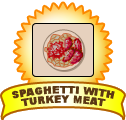
<style>
.page{position:relative;width:126px;height:120px;background:#ffffff}
.page>*{position:absolute;margin:0}
.t1{font:9.4px/9.4px "Arial-Black";letter-spacing:0.045em;color:#5b3714;text-transform:uppercase}
</style>
<div class="page">
<p class="t1" style="left:12px;top:86px;width:103px;height:21px;text-align:center">spaghetti with<br>turkey meat</p>
</div>
